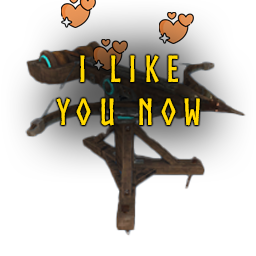
<style>
.page{position:relative;width:256px;height:256px;background:#ffffff}
.page>*{position:absolute;margin:0}
.t1{font:36px "Norse-Bold";letter-spacing:0.2em;color:#ffd800;text-transform:uppercase}
</style>
<div class="page">
<p class="t1" style="left:56px;top:55px;width:144px;height:71px;text-align:center">I Like<br>You Now</p>
</div>
